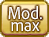
<style>
.page{position:relative;width:49px;height:37px}
.page>*{position:absolute;margin:0}
.t1{font:18px/12px "AdobeClean-Regular";color:#ffffff;scale:0.9 1}
</style>
<div class="page">
<p class="t1" style="left:8px;top:6px;width:34px;height:26px;text-align:center">Mod.<br>max</p>
</div>
